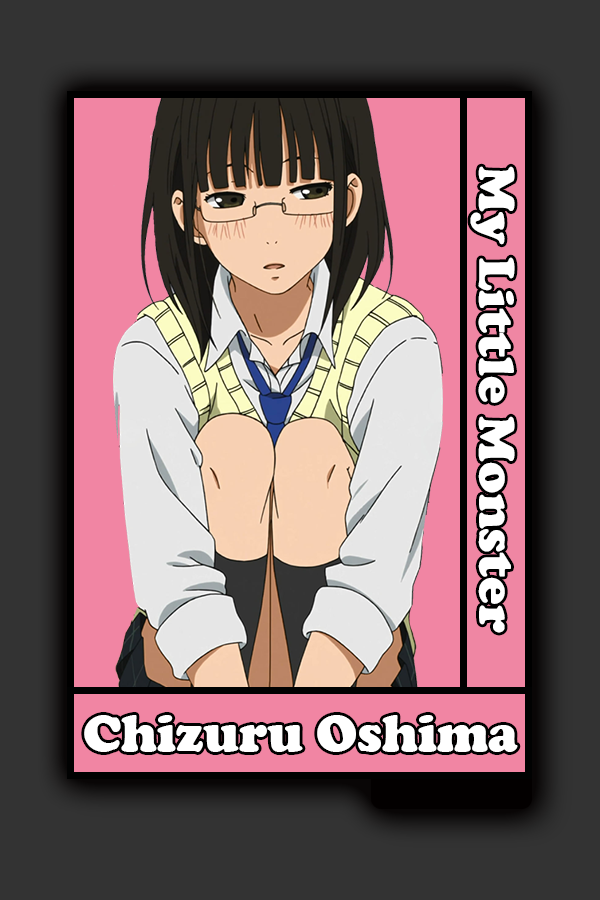
<style>
.page{position:relative;width:600px;height:900px;background:#333333}
.page>*{position:absolute;margin:0}
.t1{font:52px "CooperBlack";color:#ffffff}
.t2{font:52.8px "CooperBlack";color:#ffffff}
</style>
<div class="page">
<p class="t1" style="left:470px;top:166px;width:45px;height:467px;rotate:90deg">My Little Monster</p>
<p class="t2" style="left:84px;top:715px;width:434px;height:37px">Chizuru Oshima</p>
</div>
